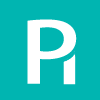
<style>
.page{position:relative;width:100px;height:100px;background:#00b5b1}
.page>*{position:absolute;margin:0}
.t1{font:82.9px "AdobeHeitiStd-Regular";letter-spacing:-0.025em;color:#ffffff;font-weight:bold;scale:1.25 1}
</style>
<div class="page">
<p class="t1" style="left:27px;top:19px;width:50px;height:65px">P</p>
</div>
